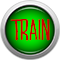
<style>
.page{position:relative;width:60px;height:60px}
.page>*{position:absolute;margin:0}
.t1{font:28px "MARI&DAVID";color:#cc0000}
</style>
<div class="page">
<p class="t1" style="left:10px;top:18px;width:40px;height:23px">TRAIN</p>
</div>
